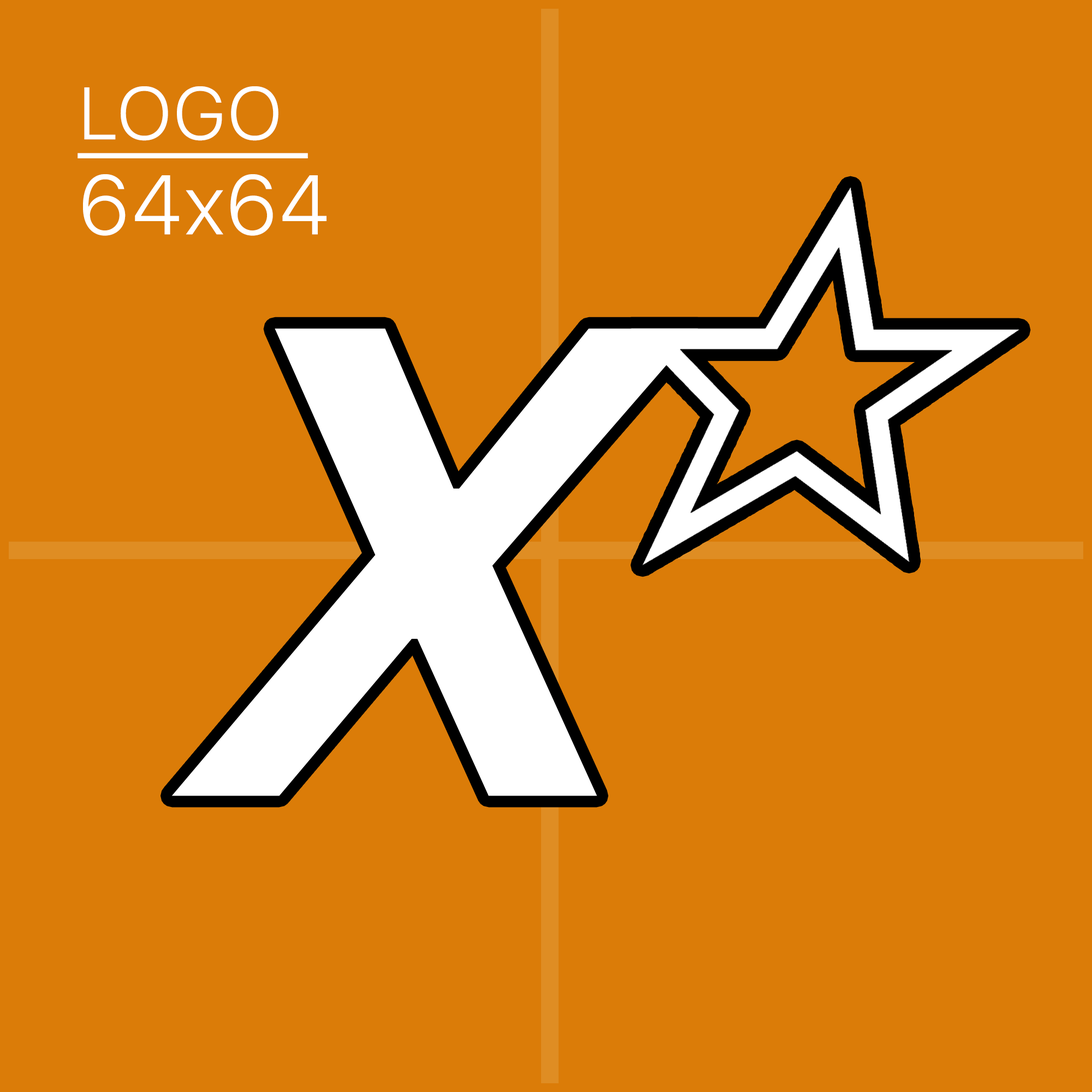
<style>
.page{position:relative;width:1092px;height:1092px;background:#db7c08}
.page>*{position:absolute;margin:0}
.t1{font:83.5px/3.3px "SFProText-Light";color:#ffffff}
.t2{font:73.7px/3.3px "SFProText-Light";color:#ffffff}
</style>
<div class="page">
<p class="t1" style="left:78px;top:86px;width:249px;height:150px"><span class="t2">LOGO<br></span><br><br>_____<br><br><br><br><br><br><br><br><br><br><br><br><br><br><br><br><br><br><br><br><br><br><br><br><br><br>64x64</p>
</div>
